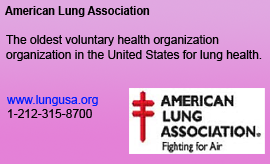
<style>
.page{position:relative;width:270px;height:164px}
.page>*{position:absolute;margin:0}
.t1{font:12px "Arial-BoldMT";color:#000000;scale:0.91 1}
.t2{font:12px "ArialMT";color:#000000}
.t3{font:12px "ArialMT";color:#001eff}
</style>
<div class="page">
<p class="t1" style="left:5px;top:6px;width:145px;height:11px">American Lung Association</p>
<p class="t2" style="left:6px;top:35px;width:213px;height:11px">The oldest voluntary health organization</p>
<p class="t2" style="left:6px;top:50px;width:256px;height:11px">organization in the United States for lung health.</p>
<p class="t3" style="left:7px;top:95px;width:91px;height:11px">www.lungusa.org</p>
<p class="t2" style="left:8px;top:109px;width:84px;height:9px">1-212-315-8700</p>
</div>
